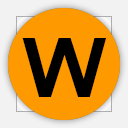
<style>
.page{position:relative;width:128px;height:128px;background:#ff9900}
.page>*{position:absolute;margin:0}
.t1{font:83.3px "CircularBold";color:#000000}
</style>
<div class="page">
<p class="t1" style="left:22px;top:37px;width:85px;height:60px">W</p>
</div>
